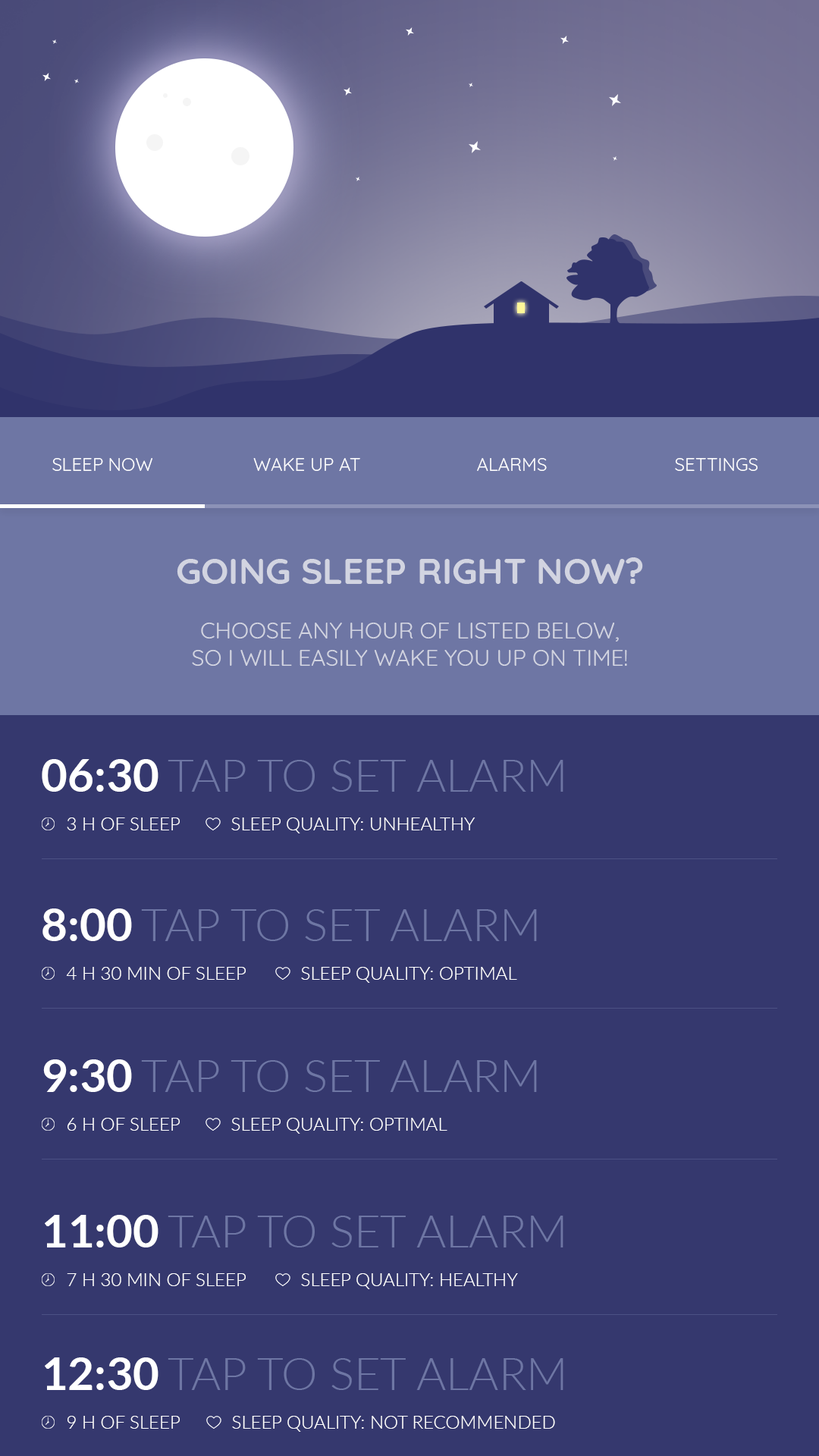
<style>
.page{position:relative;width:819px;height:1456px;background:#35386e}
.page>*{position:absolute;margin:0}
.t1{font:18.2px "Quicksand-Regular";color:#ffffff}
.t2{font:22.7px "Quicksand-Regular";color:#d2d4e1;text-transform:uppercase}
.t3{font:36.4px "Quicksand-Bold";color:#d2d4e1;text-transform:uppercase}
.t4{font:45.5px "Lato-Light";color:#6e76a4;text-transform:uppercase}
.t5{font:45.5px "Lato-Bold";color:#ffffff;text-transform:uppercase}
.t6{font:18.2px "Lato-Light";color:#ffffff;text-transform:uppercase}
</style>
<div class="page">
<p class="t1" style="left:52px;top:458px;width:100px;height:13px">SLEEP NOW</p>
<p class="t1" style="left:253px;top:458px;width:107px;height:13px">WAKE UP AT</p>
<p class="t1" style="left:477px;top:458px;width:70px;height:13px">ALARMS</p>
<p class="t1" style="left:675px;top:458px;width:83px;height:13px">SETTINGS</p>
<p class="t2" style="left:177px;top:557px;width:466px;height:109px;text-align:center"><span class="t3">going sleep right now?<br></span><br>choose any hour of listed below,<br>so I will easily wake you up on time!</p>
<p class="t4" style="left:42px;top:759px;width:521px;height:33px"><span class="t5">06:30 </span>TAP TO SET ALARM</p>
<p class="t6" style="left:67px;top:817px;width:113px;height:13px">3 h of sleep</p>
<p class="t6" style="left:231px;top:817px;width:244px;height:16px">SLEEP QUALITY: UNHEALTHY</p>
<p class="t4" style="left:42px;top:908px;width:495px;height:33px"><span class="t5">8:00 </span>TAP TO SET ALARM</p>
<p class="t6" style="left:66px;top:967px;width:180px;height:13px">4 h 30 min of sleep</p>
<p class="t6" style="left:301px;top:967px;width:216px;height:16px">SLEEP QUALITY: OPTIMAL</p>
<p class="t4" style="left:43px;top:1059px;width:494px;height:33px"><span class="t5">9:30 </span>TAP TO SET ALARM</p>
<p class="t6" style="left:67px;top:1118px;width:113px;height:13px">6 h of sleep</p>
<p class="t6" style="left:231px;top:1118px;width:216px;height:16px">SLEEP QUALITY: OPTIMAL</p>
<p class="t4" style="left:45px;top:1215px;width:518px;height:32px"><span class="t5">11:00 </span>TAP TO SET ALARM</p>
<p class="t6" style="left:67px;top:1273px;width:179px;height:13px">7 h 30 min of sleep</p>
<p class="t6" style="left:301px;top:1273px;width:217px;height:16px">SLEEP QUALITY: HEALTHY</p>
<p class="t4" style="left:45px;top:1357px;width:518px;height:33px"><span class="t5">12:30 </span>TAP TO SET ALARM</p>
<p class="t6" style="left:67px;top:1416px;width:113px;height:13px">9 H of sleep</p>
<p class="t6" style="left:232px;top:1416px;width:323px;height:16px">SLEEP QUALITY: Not recommended</p>
</div>
